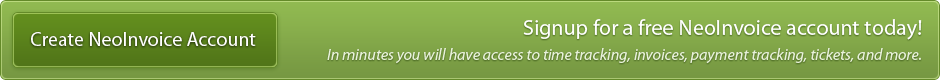
<style>
.page{position:relative;width:940px;height:80px}
.page>*{position:absolute;margin:0}
.t1{font:16px/25px "MyriadPro-It";color:#e8f1da}
.t2{font:22px/25px "MyriadPro-Regular";color:#ffffff}
.t3{font:20px "MyriadPro-Regular";color:#ffffff}
</style>
<div class="page">
<p class="t1" style="left:327px;top:19px;width:595px;height:45px;text-align:right"><span class="t2">Signup for a free NeoInvoice account today!<br></span>In minutes you will have access to time tracking, invoices, payment tracking, tickets, and more.</p>
<p class="t3" style="left:31px;top:32px;width:225px;height:14px">Create NeoInvoice Account</p>
</div>
